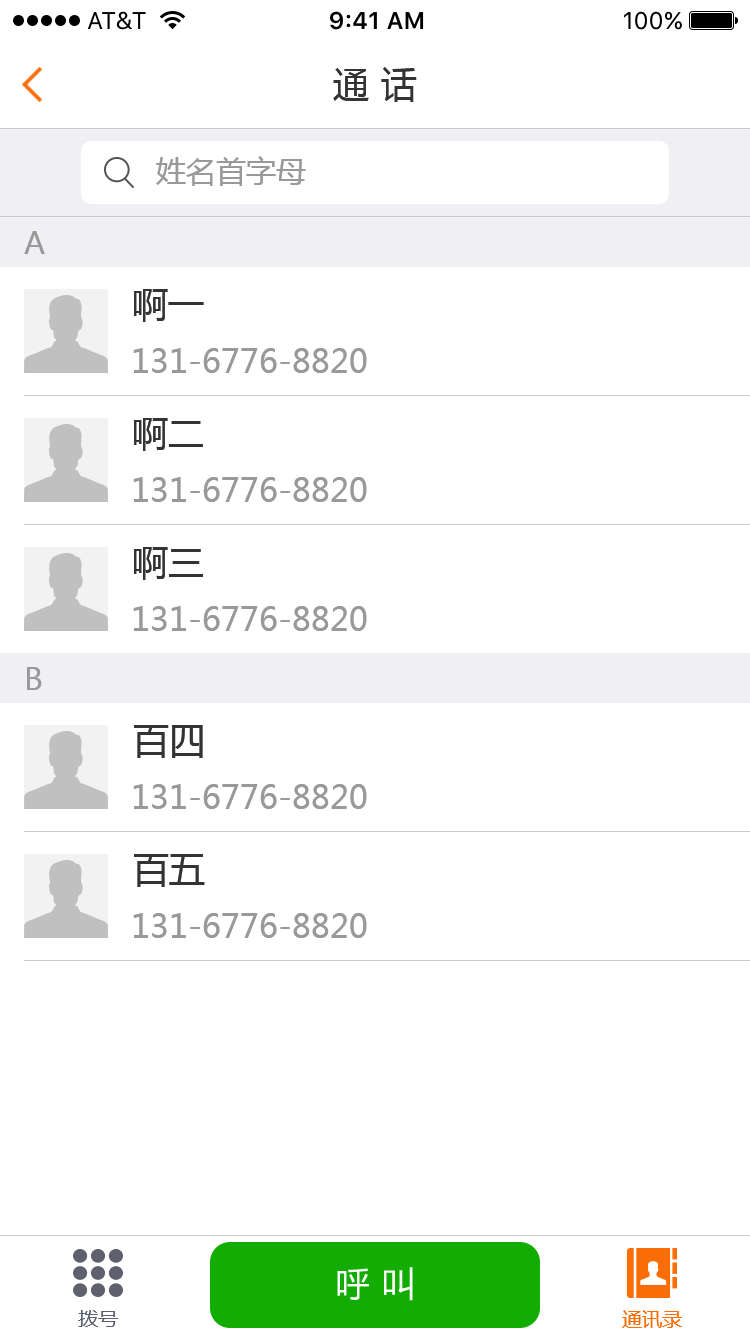
<style>
.page{position:relative;width:750px;height:1334px;background:#ffffff}
.page>*{position:absolute;margin:0}
.t1{font:36px "MicrosoftYaHei";color:#333333}
.t2{font:30px "MicrosoftYaHei";color:#999999}
.t3{font:32px "MicrosoftYaHei";color:#999999}
.t4{font:34.8px "MicrosoftYaHei";color:#ffffff}
.t5{font:20px "MicrosoftYaHei";color:#5e616d}
.t6{font:20px "MicrosoftYaHei";color:#fb6d07}
</style>
<div class="page">
<p class="t1" style="left:333px;top:67px;width:84px;height:35px">通 话</p>
<p class="t2" style="left:156px;top:156px;width:150px;height:30px">姓名首字母</p>
<p class="t2" style="left:24px;top:231px;width:21px;height:23px">A</p>
<p class="t1" style="left:134px;top:289px;width:70px;height:33px">啊一</p>
<p class="t3" style="left:133px;top:348px;width:234px;height:25px">131-6776-8820</p>
<p class="t1" style="left:134px;top:418px;width:69px;height:33px">啊二</p>
<p class="t3" style="left:133px;top:477px;width:234px;height:25px">131-6776-8820</p>
<p class="t1" style="left:134px;top:547px;width:69px;height:33px">啊三</p>
<p class="t3" style="left:133px;top:606px;width:234px;height:25px">131-6776-8820</p>
<p class="t2" style="left:27px;top:667px;width:15px;height:23px">B</p>
<p class="t1" style="left:134px;top:725px;width:69px;height:33px">百四</p>
<p class="t3" style="left:133px;top:784px;width:234px;height:25px">131-6776-8820</p>
<p class="t1" style="left:134px;top:854px;width:71px;height:33px">百五</p>
<p class="t3" style="left:133px;top:913px;width:234px;height:25px">131-6776-8820</p>
<p class="t4" style="left:337px;top:1267px;width:76px;height:34px">呼 叫</p>
<p class="t5" style="left:78px;top:1310px;width:40px;height:17px">拨号</p>
<p class="t6" style="left:622px;top:1310px;width:60px;height:18px">通讯录</p>
</div>
